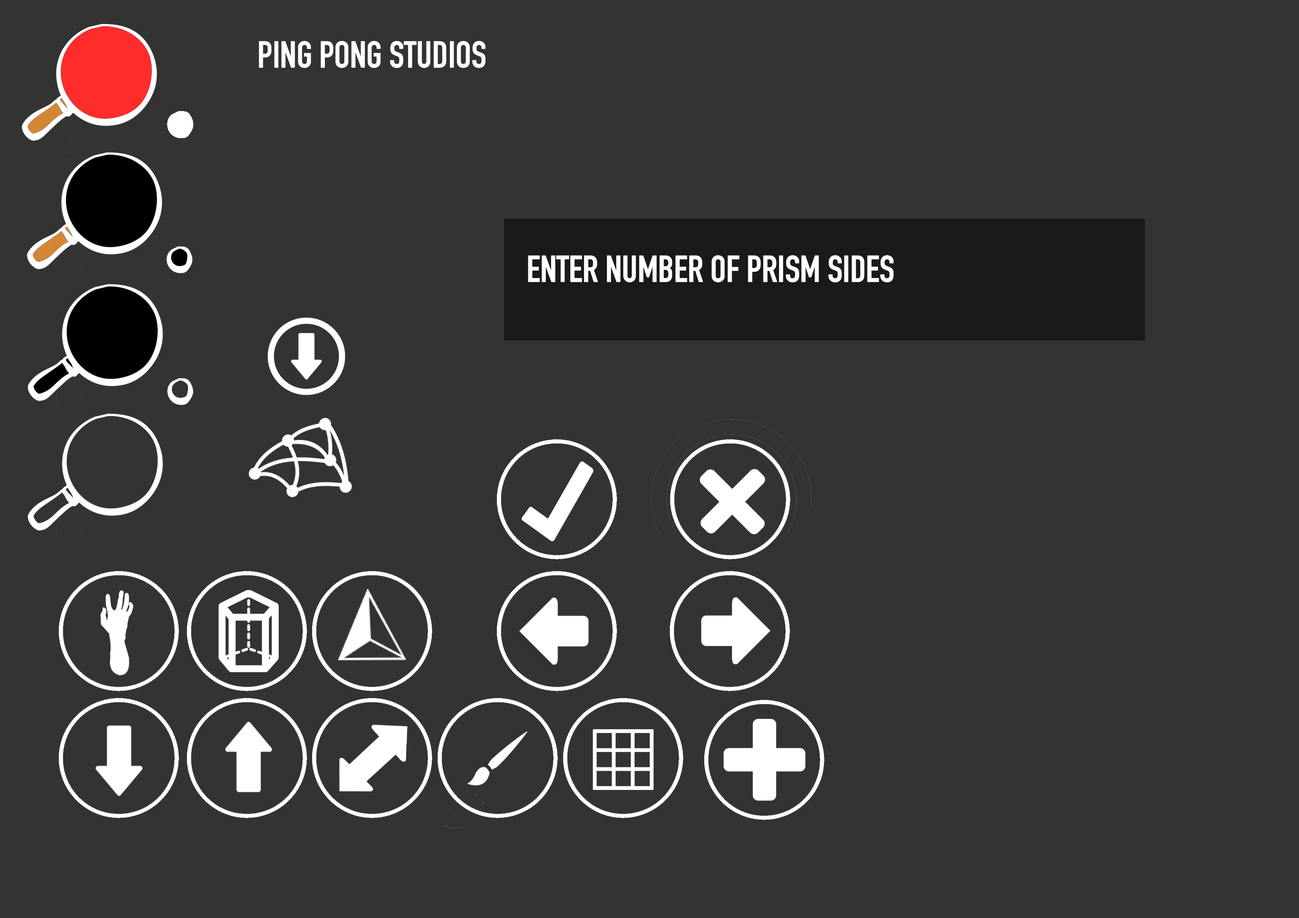
<style>
.page{position:relative;width:1299px;height:918px;background:#333333}
.page>*{position:absolute;margin:0}
.t1{font:37px "DINCondensed-Bold";color:#ffffff}
</style>
<div class="page">
<p class="t1" style="left:259px;top:41px;width:227px;height:27px">PING PONG STUDIOS</p>
<p class="t1" style="left:528px;top:255px;width:366px;height:27px">ENTER NUMBER OF PRISM SIDES</p>
</div>
